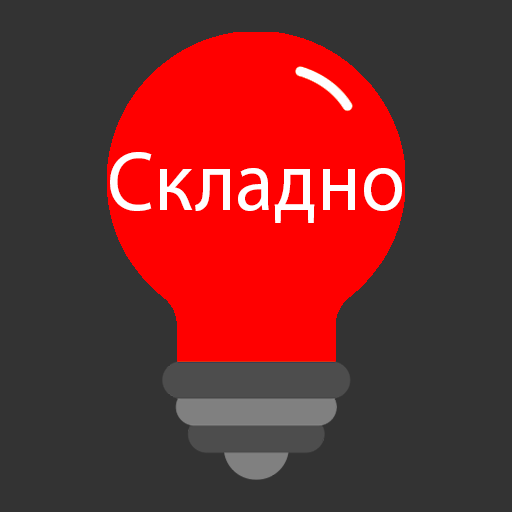
<style>
.page{position:relative;width:512px;height:512px;background:#333333}
.page>*{position:absolute;margin:0}
.t1{font:84.7px "MyriadPro-Regular";color:#ffffff;scale:0.95 1}
</style>
<div class="page">
<p class="t1" style="left:110px;top:152px;width:292px;height:71px">Складно</p>
</div>
